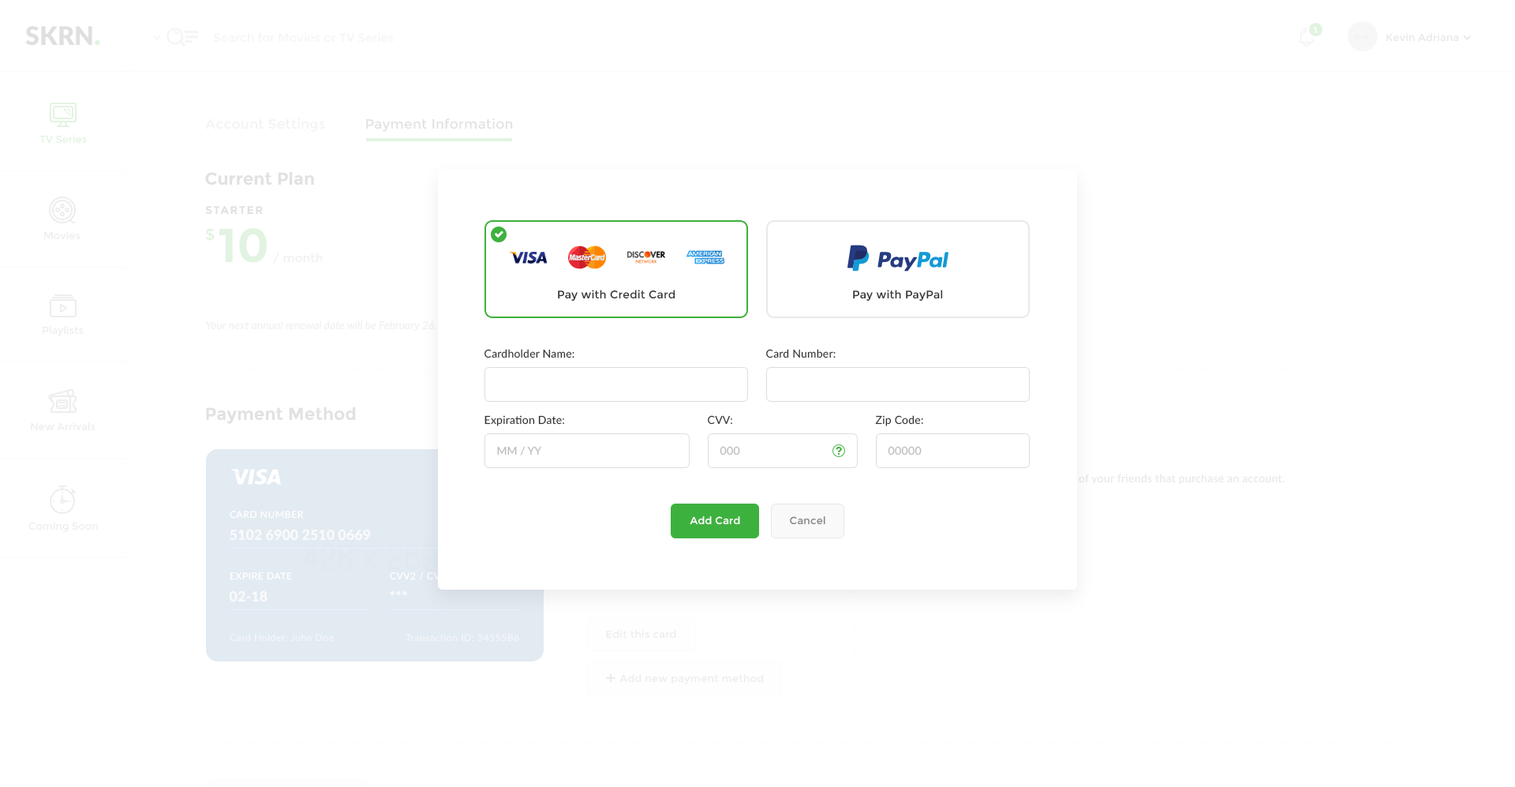
<style>
.page{position:relative;width:1515px;height:787px;background:#ffffff}
.page>*{position:absolute;margin:0}
.t1{font:11px "Montserrat-Regular";letter-spacing:0.017em;color:#333333}
.t2{font:11px "Lato-Regular";letter-spacing:0.015em;color:#333333}
.t3{font:11px "Lato-Regular";color:#bcbcbc}
.t4{font:11px "Lato-Regular";letter-spacing:0.025em;color:#bcbcbc}
.t5{font:10.3px "Montserrat-Regular";letter-spacing:0.02em;color:#ffffff}
.t6{font:10.3px "Montserrat-Regular";letter-spacing:0.02em;color:#858585}
</style>
<div class="page">
<p class="t1" style="left:558px;top:290px;width:118px;height:11px">Pay with Credit Card</p>
<p class="t1" style="left:853px;top:290px;width:90px;height:11px">Pay with PayPal</p>
<p class="t2" style="left:485px;top:349px;width:90px;height:9px">Cardholder Name:</p>
<p class="t2" style="left:766px;top:349px;width:70px;height:9px">Card Number:</p>
<p class="t2" style="left:485px;top:415px;width:79px;height:11px">Expiration Date:</p>
<p class="t2" style="left:708px;top:415px;width:24px;height:10px">CVV:</p>
<p class="t2" style="left:875px;top:415px;width:48px;height:11px">Zip Code:</p>
<p class="t3" style="left:497px;top:446px;width:44px;height:9px">MM / YY</p>
<p class="t4" style="left:720px;top:446px;width:20px;height:9px">000</p>
<p class="t4" style="left:888px;top:446px;width:34px;height:9px">00000</p>
<p class="t5" style="left:690px;top:516px;width:50px;height:9px">Add Card</p>
<p class="t6" style="left:790px;top:516px;width:36px;height:9px">Cancel</p>
</div>
